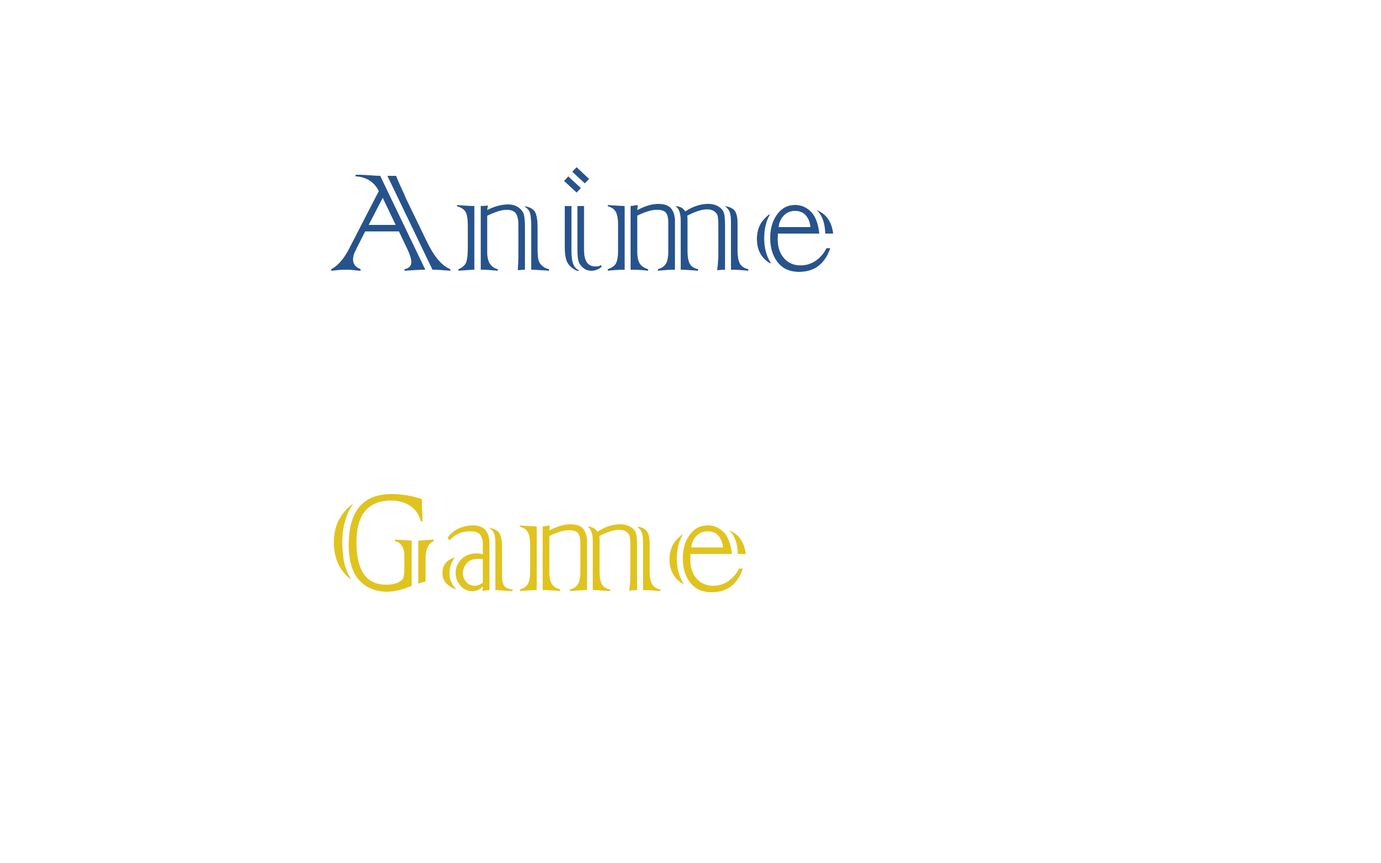
<style>
.page{position:relative;width:1381px;height:863px;background:#ffffff}
.page>*{position:absolute;margin:0}
.t1{font:182.9px "ColonnaMT";color:#27538d}
.t2{font:182.9px "ColonnaMT";color:#e1c31e}
.t3{font:182.9px "ColonnaMT";color:#e11e2c}
</style>
<div class="page">
<p class="t1" style="left:331px;top:167px;width:503px;height:105px">Anime</p>
<p class="t2" style="left:333px;top:494px;width:413px;height:98px"><span class="t3"><br></span>Game</p>
</div>
